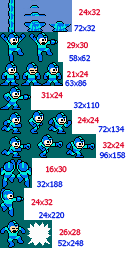
<style>
.page{position:relative;width:129px;height:259px;background:#ffffff}
.page>*{position:absolute;margin:0}
.t1{font:8px "Tahoma";color:#df0024}
.t2{font:8px "Tahoma";color:#001adf}
.t3{font:8px "Tahoma"}
</style>
<div class="page">
<p class="t1" style="left:79px;top:9px;width:22px;height:7px">24x32</p>
<p class="t2" style="left:74px;top:25px;width:22px;height:7px">72x32</p>
<p class="t1" style="left:67px;top:42px;width:21px;height:7px">29x30</p>
<p class="t2" style="left:69px;top:55px;width:22px;height:7px">58x62</p>
<p class="t1" style="left:67px;top:71px;width:22px;height:7px">21x24</p>
<p class="t3" style="left:65px;top:80px;width:22px;height:7px">63x86</p>
<p class="t1" style="left:41px;top:92px;width:22px;height:7px">31x24</p>
<p class="t2" style="left:73px;top:102px;width:27px;height:7px">32x110</p>
<p class="t1" style="left:77px;top:117px;width:22px;height:7px">24x24</p>
<p class="t2" style="left:98px;top:126px;width:27px;height:7px">72x134</p>
<p class="t1" style="left:102px;top:142px;width:23px;height:7px">32x24</p>
<p class="t2" style="left:99px;top:152px;width:27px;height:7px">96x158</p>
<p class="t1" style="left:46px;top:166px;width:21px;height:7px">16x30</p>
<p class="t2" style="left:37px;top:181px;width:26px;height:7px">32x188</p>
<p class="t1" style="left:31px;top:199px;width:22px;height:7px">24x32</p>
<p class="t2" style="left:39px;top:212px;width:26px;height:7px">24x220</p>
<p class="t1" style="left:59px;top:229px;width:22px;height:7px">26x28</p>
<p class="t2" style="left:58px;top:240px;width:26px;height:7px">52x248</p>
</div>
